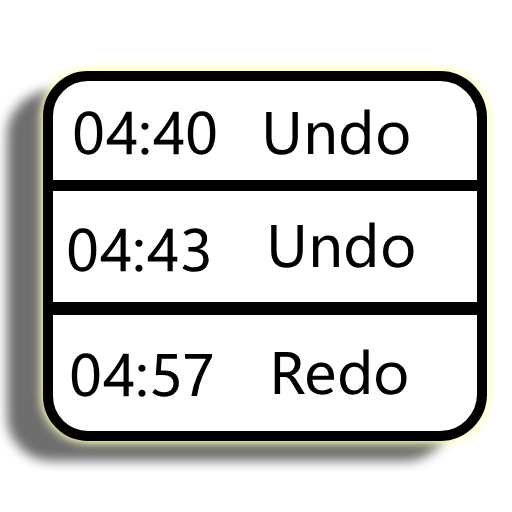
<style>
.page{position:relative;width:512px;height:512px;background:#ffffff}
.page>*{position:absolute;margin:0}
.t1{font:60px "SegoeUIVariable-RegularSmall";color:#000000}
</style>
<div class="page">
<p class="t1" style="left:74px;top:111px;width:142px;height:44px">04:40</p>
<p class="t1" style="left:266px;top:109px;width:143px;height:46px">Undo</p>
<p class="t1" style="left:271px;top:222px;width:143px;height:46px">Undo</p>
<p class="t1" style="left:68px;top:228px;width:141px;height:44px">04:43</p>
<p class="t1" style="left:71px;top:353px;width:142px;height:44px">04:57</p>
<p class="t1" style="left:274px;top:349px;width:133px;height:46px">Redo</p>
</div>
